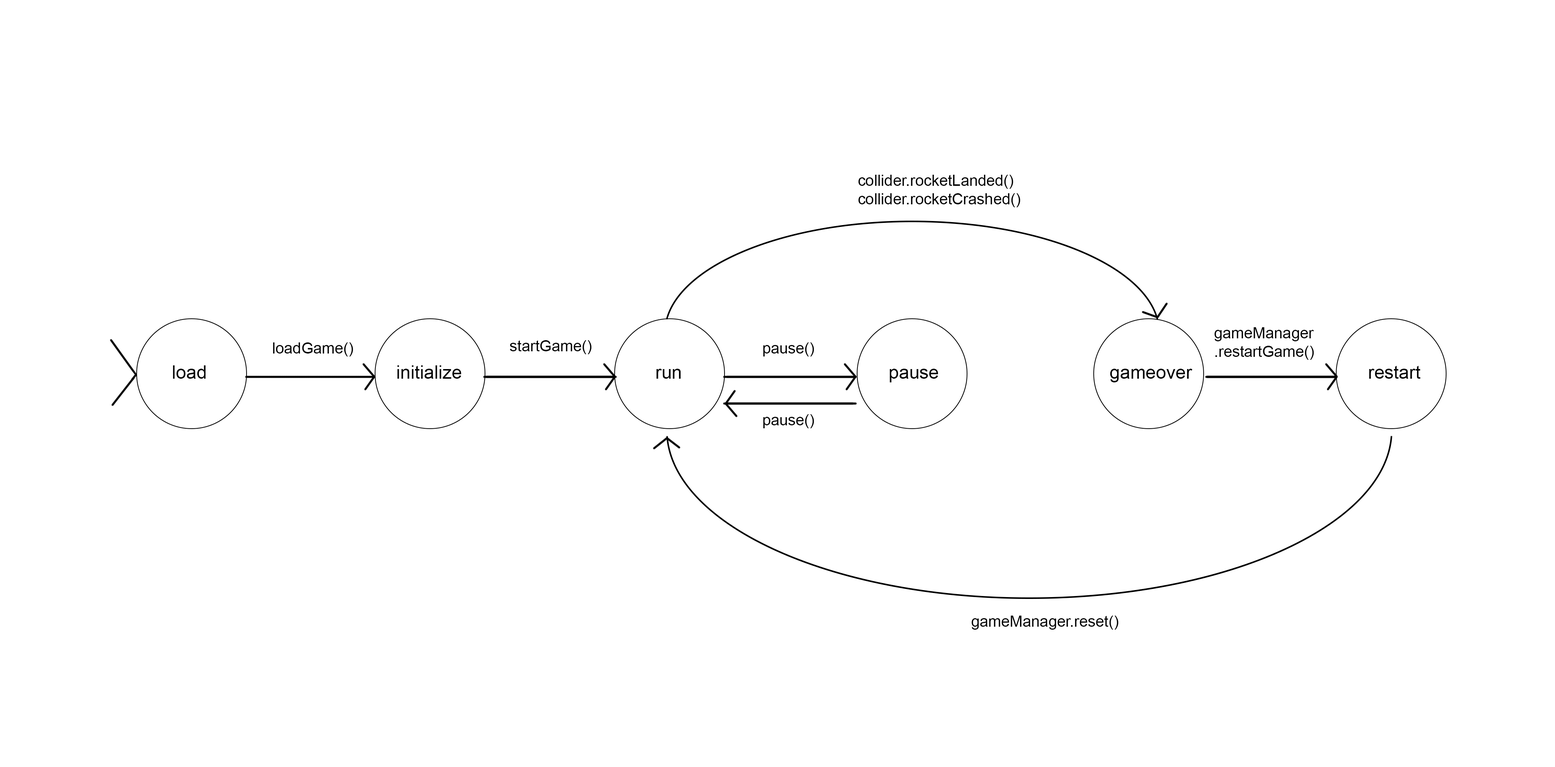
<style>
.page{position:relative;width:1555px;height:767px;background:#ffffff}
.page>*{position:absolute;margin:0}
.t1{font:15.4px "ArialMT";color:#000000}
.t2{font:18.5px "ArialMT";color:#000000}
</style>
<div class="page">
<p class="t1" style="left:858px;top:175px;width:162px;height:32px">collider.rocketLanded()<br>collider.rocketCrashed()</p>
<p class="t1" style="left:1214px;top:327px;width:100px;height:33px">gameManager<br>.restartGame()</p>
<p class="t1" style="left:510px;top:340px;width:82px;height:14px">startGame()</p>
<p class="t1" style="left:273px;top:342px;width:80px;height:14px">loadGame()</p>
<p class="t1" style="left:763px;top:342px;width:51px;height:14px">pause()</p>
<p class="t2" style="left:173px;top:365px;width:33px;height:14px">load</p>
<p class="t2" style="left:397px;top:365px;width:64px;height:14px">initialize</p>
<p class="t2" style="left:1369px;top:366px;width:51px;height:13px">restart</p>
<p class="t2" style="left:656px;top:369px;width:25px;height:10px">run</p>
<p class="t2" style="left:890px;top:369px;width:48px;height:13px">pause</p>
<p class="t2" style="left:1110px;top:369px;width:82px;height:13px">gameover</p>
<p class="t1" style="left:763px;top:414px;width:51px;height:14px">pause()</p>
<p class="t1" style="left:971px;top:616px;width:147px;height:14px">gameManager.reset()</p>
</div>
